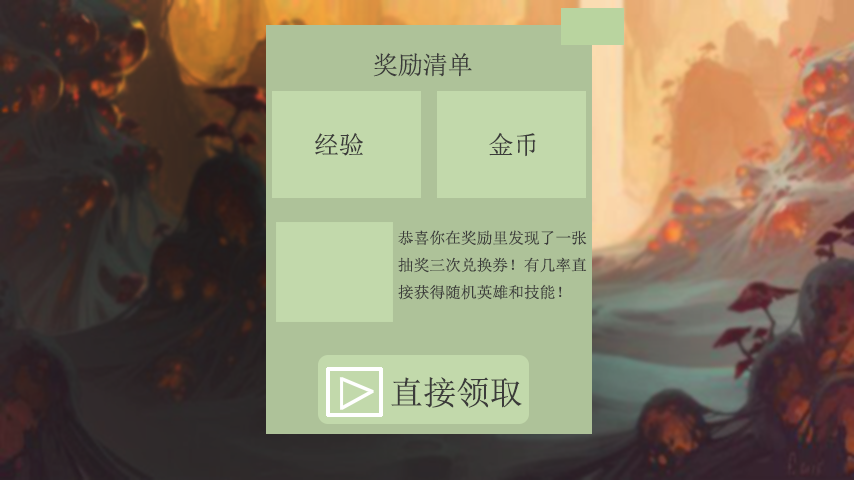
<style>
.page{position:relative;width:854px;height:480px}
.page>*{position:absolute;margin:0}
.t1{font:25px "SimSun";color:#3b3b3a}
.t2{font:15.5px "SimSun";color:#3b3b3a}
.t3{font:33px "SimSun";color:#3b3b3a}
</style>
<div class="page">
<p class="t1" style="left:373px;top:53px;width:99px;height:24px">奖励清单</p>
<p class="t1" style="left:315px;top:133px;width:48px;height:23px">经验</p>
<p class="t1" style="left:489px;top:132px;width:47px;height:25px">金币</p>
<p class="t2" style="left:398px;top:230px;width:189px;height:70px">恭喜你在奖励里发现了一张<br>抽奖三次兑换券！有几率直<br>接获得随机英雄和技能！</p>
<p class="t3" style="left:391px;top:377px;width:131px;height:31px">直接领取</p>
</div>
